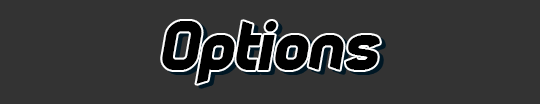
<style>
.page{position:relative;width:540px;height:104px;background:#333333}
.page>*{position:absolute;margin:0}
.t1{font:72px "PiratesofCydonia";color:#000000;font-style:italic}
</style>
<div class="page">
<p class="t1" style="left:162px;top:21px;width:218px;height:63px">Options</p>
</div>
